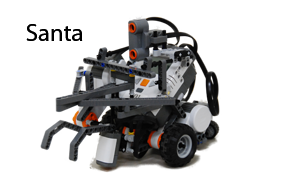
<style>
.page{position:relative;width:283px;height:190px;background:#ffffff}
.page>*{position:absolute;margin:0}
.t1{font:24.4px "MyriadPro-Regular";color:#000000}
</style>
<div class="page">
<p class="t1" style="left:26px;top:24px;width:57px;height:17px">Santa</p>
</div>
